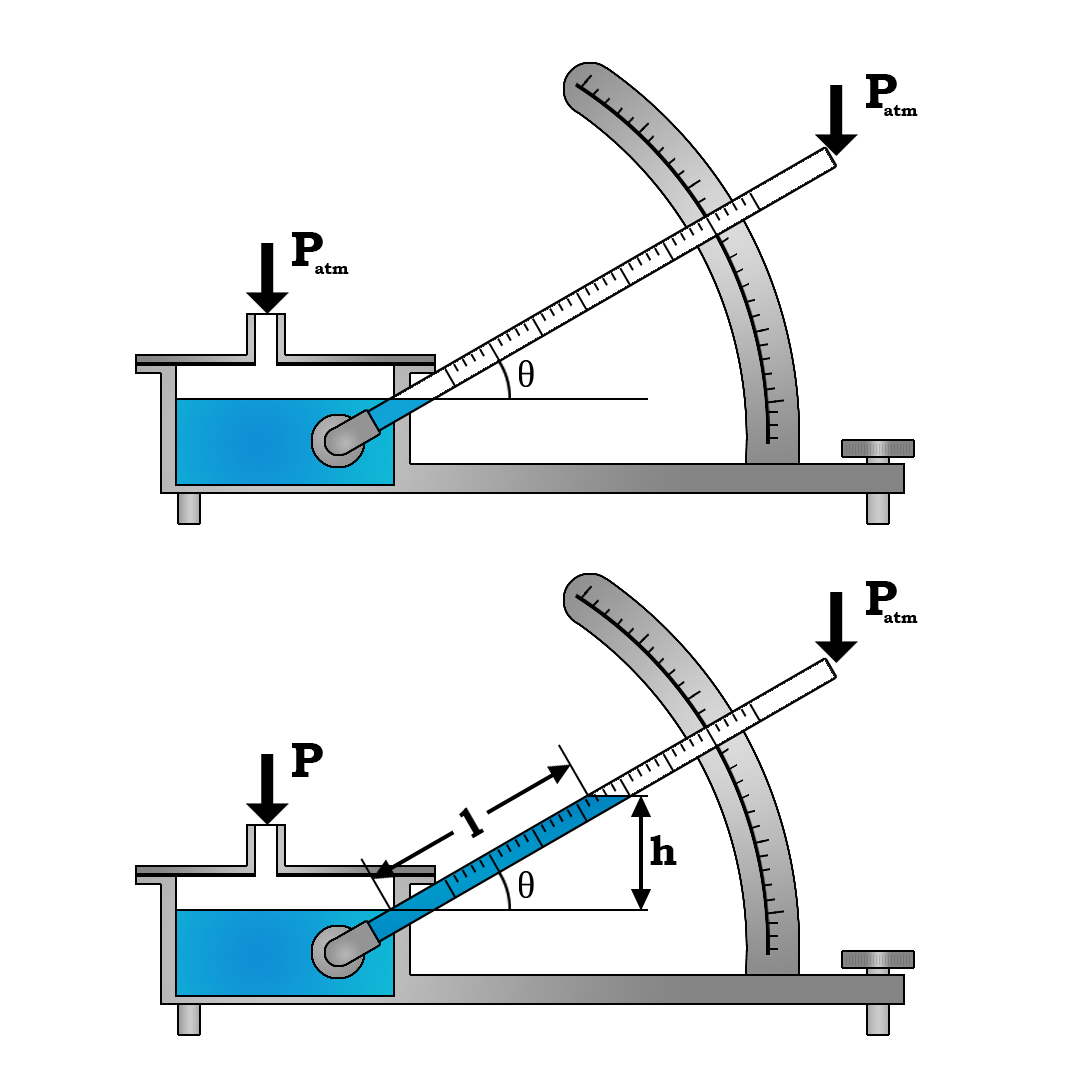
<style>
.page{position:relative;width:1080px;height:1080px;background:#ffffff}
.page>*{position:absolute;margin:0}
.t1{font:50px "BookmanOldStyle-Bold";color:#000000}
.t2{font:41.7px "BookmanOldStyle-Bold";color:#000000}
</style>
<div class="page">
<p class="t1" style="left:866px;top:74px;width:31px;height:34px">P</p>
<p class="t1" style="left:292px;top:232px;width:31px;height:34px">P</p>
<p class="t1" style="left:866px;top:581px;width:31px;height:34px">P</p>
<p class="t1" style="left:292px;top:743px;width:31px;height:34px">P</p>
<p class="t2" style="left:650px;top:835px;width:27px;height:30px">h</p>
</div>
